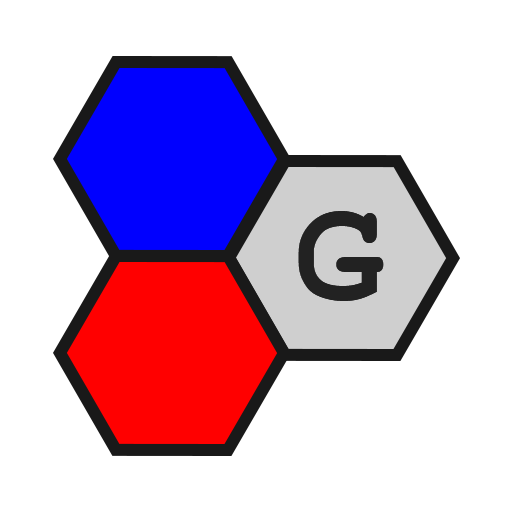
<style>
.page{position:relative;width:512px;height:512px;background:#ffffff}
.page>*{position:absolute;margin:0}
.t1{font:150px "CourierNewPS-BoldMT";color:#222222}
</style>
<div class="page">
<p class="t1" style="left:298px;top:211px;width:86px;height:90px">G</p>
</div>
